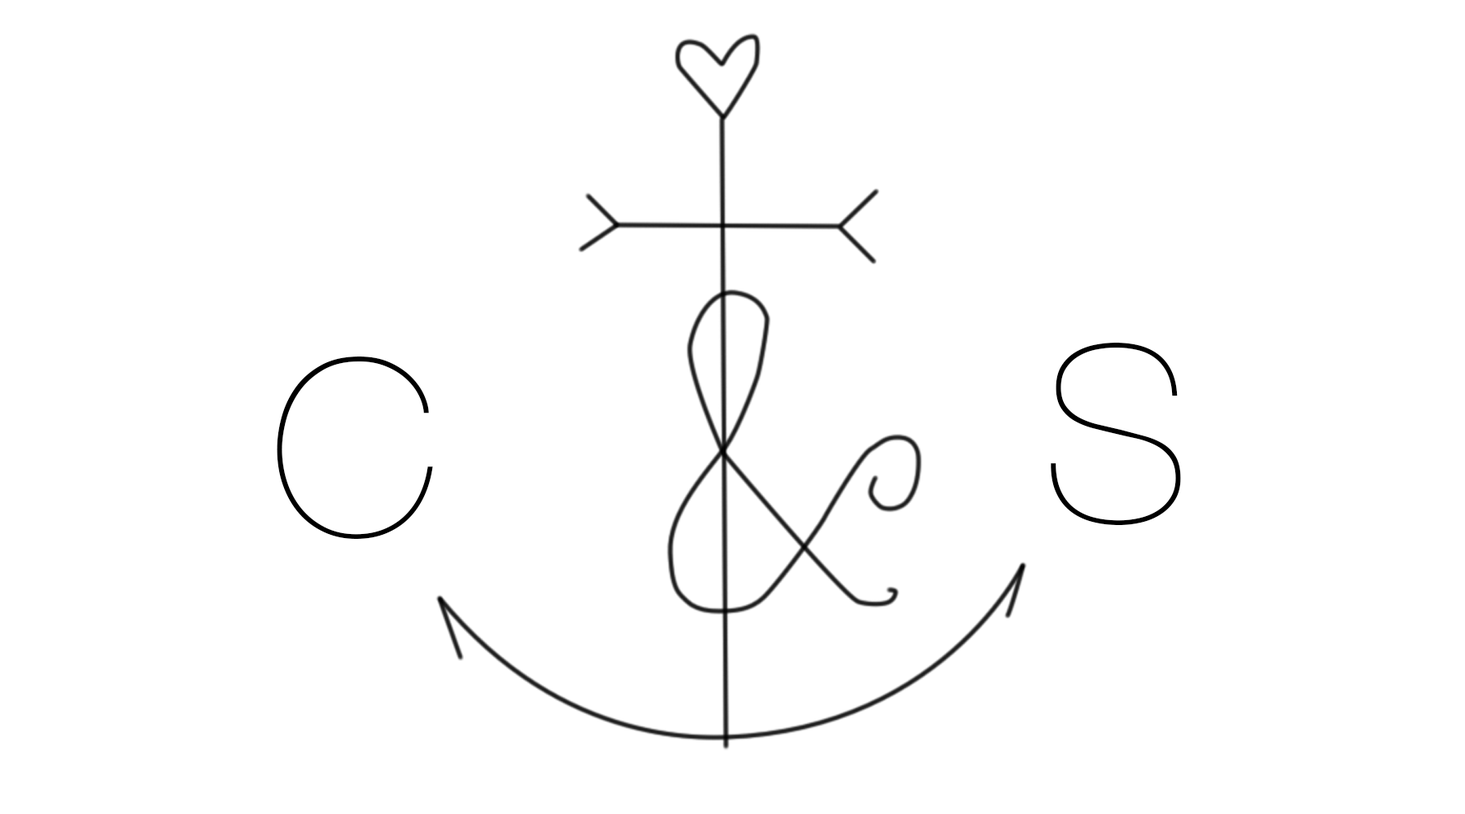
<style>
.page{position:relative;width:1465px;height:814px;background:#ffffff}
.page>*{position:absolute;margin:0}
.t1{font:244.2px "HelveticaNeue-UltraLight";color:#000000}
</style>
<div class="page">
<p class="t1" style="left:1051px;top:343px;width:130px;height:182px">S</p>
<p class="t1" style="left:277px;top:356px;width:156px;height:183px">C</p>
</div>
